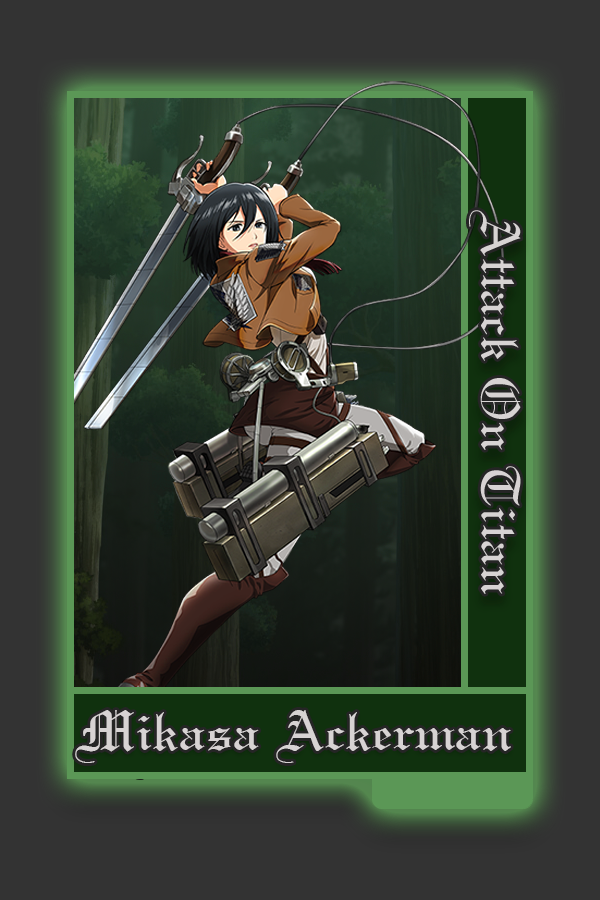
<style>
.page{position:relative;width:600px;height:900px;background:#333333}
.page>*{position:absolute;margin:0}
.t1{font:58.3px "Linotext";color:#d7d4d4}
.t2{font:60.3px "Linotext";color:#d7d4d4}
</style>
<div class="page">
<p class="t1" style="left:469px;top:210px;width:52px;height:384px;rotate:90deg">Attack On Titan</p>
<p class="t2" style="left:75px;top:710px;width:436px;height:53px">Mikasa Ackerman</p>
</div>
